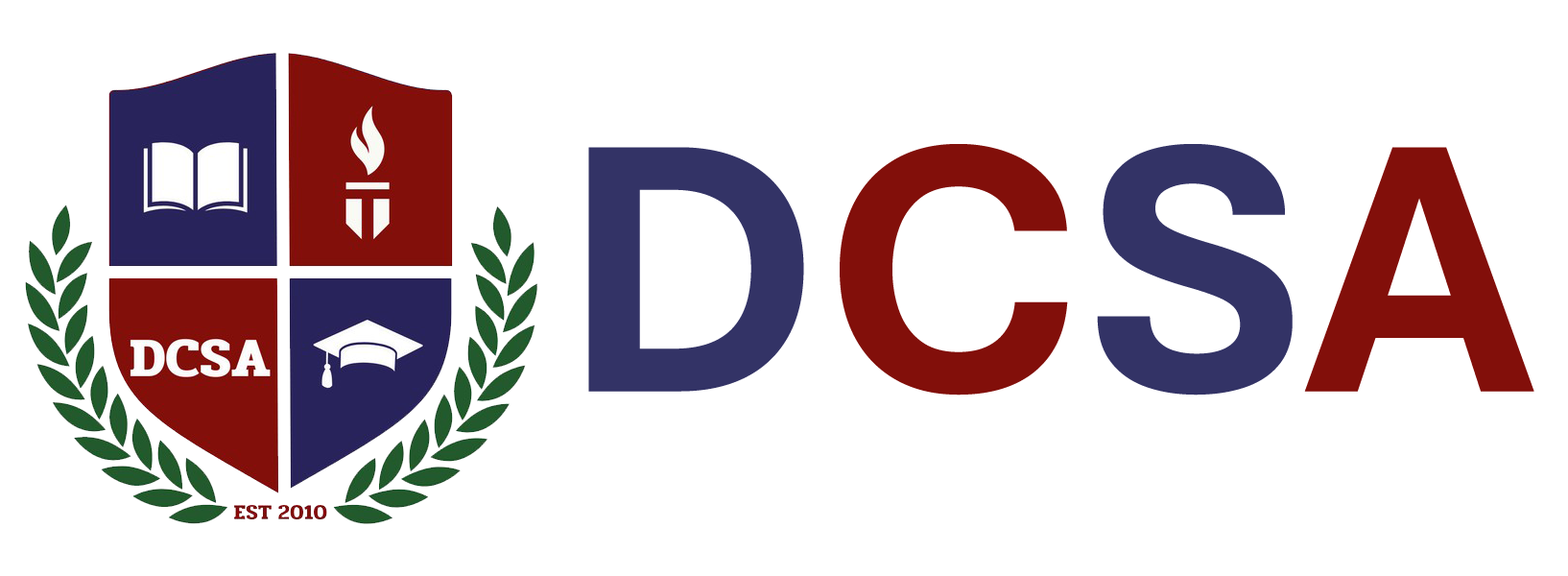
<style>
.page{position:relative;width:1568px;height:576px;background:#ffffff}
.page>*{position:absolute;margin:0}
.t1{font:370.9px "Aptos-Bold";color:#333366}
.t2{font:370.9px "Aptos-Bold";color:#820f0a}
</style>
<div class="page">
<p class="t1" style="left:588px;top:144px;width:946px;height:251px">D<span class="t2">C</span>S<span class="t2">A</span></p>
</div>
